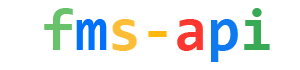
<style>
.page{position:relative;width:300px;height:70px;background:#ffffff}
.page>*{position:absolute;margin:0}
.t1{font:60px "Consolas-Bold";color:#68c16b}
.t2{font:60px "Consolas-Bold";color:#0071fa}
.t3{font:60px "Consolas-Bold";color:#fdbd36}
.t4{font:60px "Consolas-Bold";color:#ffb80e}
.t5{font:60px "Consolas-Bold";color:#fc3730}
.t6{font:60px "Consolas-Bold";color:#0f7af0}
.t7{font:60px "Consolas-Bold";color:#38a955}
</style>
<div class="page">
<p class="t1" style="left:44px;top:8px;width:226px;height:54px">f<span class="t2">m</span><span class="t3">s</span><span class="t4">-</span><span class="t5">a</span><span class="t6">p</span><span class="t7">i</span></p>
</div>
